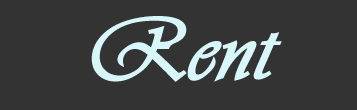
<style>
.page{position:relative;width:357px;height:110px;background:#333333}
.page>*{position:absolute;margin:0}
.t1{font:90px "Vivaldii";color:#daf9fc;font-weight:bold}
</style>
<div class="page">
<p class="t1" style="left:91px;top:16px;width:191px;height:66px">Rent</p>
</div>
